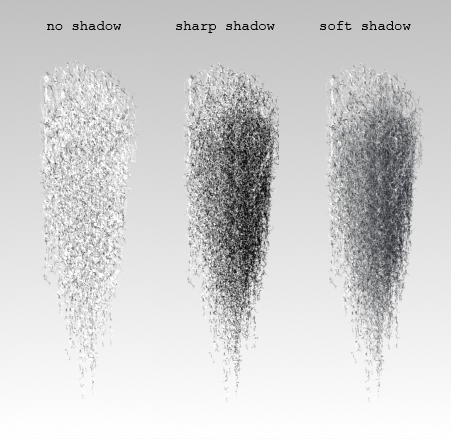
<style>
.page{position:relative;width:451px;height:439px}
.page>*{position:absolute;margin:0}
.t1{font:13.9px "CourierNewPSMT";color:#000000}
</style>
<div class="page">
<p class="t1" style="left:47px;top:21px;width:74px;height:9px">no shadow</p>
<p class="t1" style="left:176px;top:21px;width:99px;height:12px">sharp shadow</p>
<p class="t1" style="left:320px;top:21px;width:91px;height:9px">soft shadow</p>
</div>
